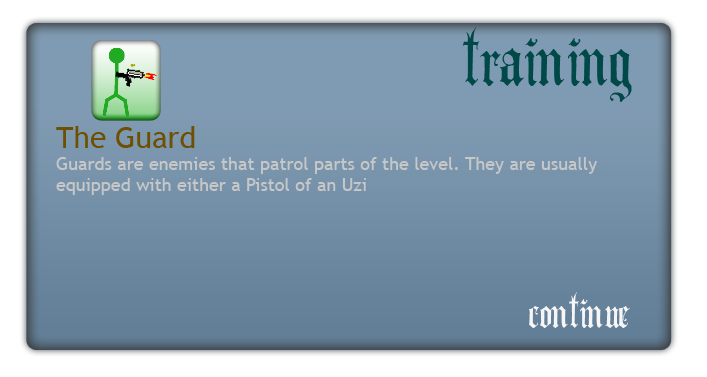
<style>
.page{position:relative;width:707px;height:377px}
.page>*{position:absolute;margin:0}
.t1{font:100px "AngloText";color:#004948}
.t2{font:18px "TrebuchetMS";color:#c7c7c7}
.t3{font:30px "TrebuchetMS";color:#6f4f01}
.t4{font:60px "AngloText";color:#f6f6f6}
</style>
<div class="page">
<p class="t1" style="left:463px;top:27px;width:169px;height:75px">training</p>
<p class="t2" style="left:56px;top:126px;width:541px;height:69px"><span class="t3">The Guard<br></span>Guards are enemies that patrol parts of the level. They are usually<br>equipped with either a Pistol of an Uzi</p>
<p class="t4" style="left:529px;top:292px;width:101px;height:36px">continue</p>
</div>
